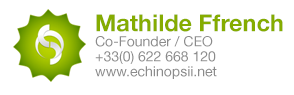
<style>
.page{position:relative;width:294px;height:95px;background:#ffffff}
.page>*{position:absolute;margin:0}
.t1{font:14px/15px "HelveticaNeue";color:#8b8b8b}
.t2{font:23.5px "HelveticaNeue-Bold";color:#85ac00}
</style>
<div class="page">
<p class="t1" style="left:95px;top:14px;width:188px;height:65px"><span class="t2">Mathilde Ffrench<br></span>Co-Founder / CEO<br>+33(0) 622 668 120<br>www.echinopsii.net</p>
</div>
